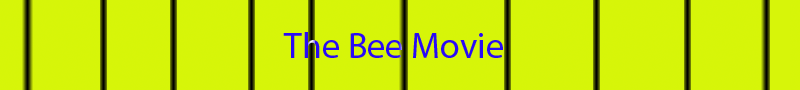
<style>
.page{position:relative;width:800px;height:90px;background:#d6f509}
.page>*{position:absolute;margin:0}
.t1{font:36px "MyriadPro-Regular";color:#290af6}
</style>
<div class="page">
<p class="t1" style="left:283px;top:32px;width:220px;height:26px">The Bee Movie</p>
</div>
